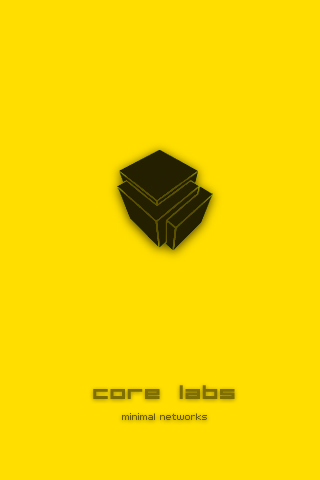
<style>
.page{position:relative;width:320px;height:480px;background:#ffde00}
.page>*{position:absolute;margin:0}
.t1{font:18px "Aerial";color:#7f6f00}
.t2{font:8px "PFTempestaSeven";color:#6b5d00}
</style>
<div class="page">
<p class="t1" style="left:93px;top:385px;width:142px;height:14px">core labs</p>
<p class="t2" style="left:122px;top:413px;width:85px;height:7px">minimal networks</p>
</div>
